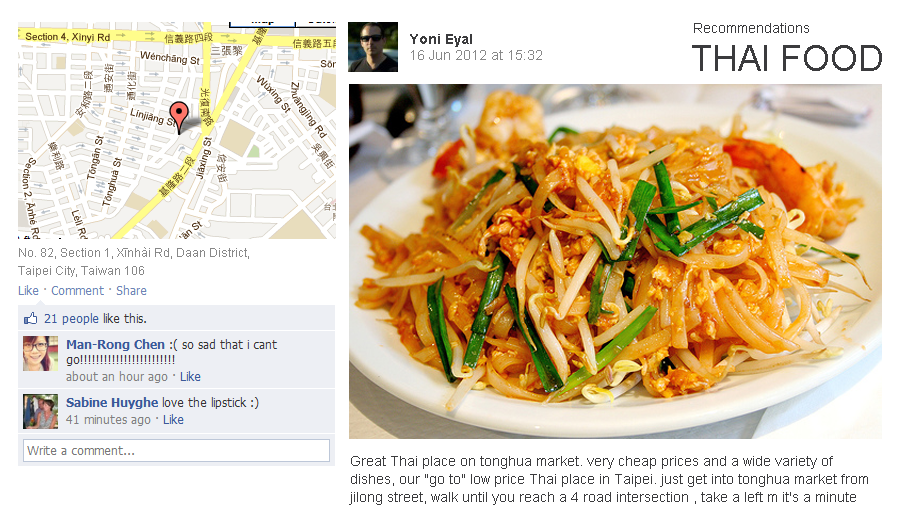
<style>
.page{position:relative;width:902px;height:526px;background:#ffffff}
.page>*{position:absolute;margin:0}
.t1{font:14px "ArialMT";color:#3b3b3d}
.t2{font:14px "Arial-BoldMT";color:#3b3b3d}
.t3{font:14px "ArialMT";color:#888888}
.t4{font:36px "ArialMT";color:#3b3b3d}
.t5{font:12px/18px "ArialMT";color:#888888}
.t6{font:14px/18px "ArialMT";color:#3b3b3d}
</style>
<div class="page">
<p class="t1" style="left:694px;top:23px;width:115px;height:10px">Recommendations</p>
<p class="t2" style="left:410px;top:34px;width:62px;height:13px">Yoni Eyal</p>
<p class="t3" style="left:411px;top:50px;width:131px;height:10px">16 Jun 2012 at 15:32</p>
<p class="t4" style="left:692px;top:45px;width:190px;height:26px">THAI FOOD</p>
<p class="t5" style="left:18px;top:247px;width:231px;height:30px">No. 82, Section 1, Xīnhài Rd, Daan District,<br>Taipei City, Taiwan 106</p>
<p class="t6" style="left:349px;top:456px;width:519px;height:49px">Great Thai place on tonghua market. very cheap prices and a wide variety of dishes, our "go to" low price Thai place in Taipei. just get into tonghua market from jilong street, walk until you reach a 4 road intersection , take a left m it's a minute walk on your left.</p>
</div>
